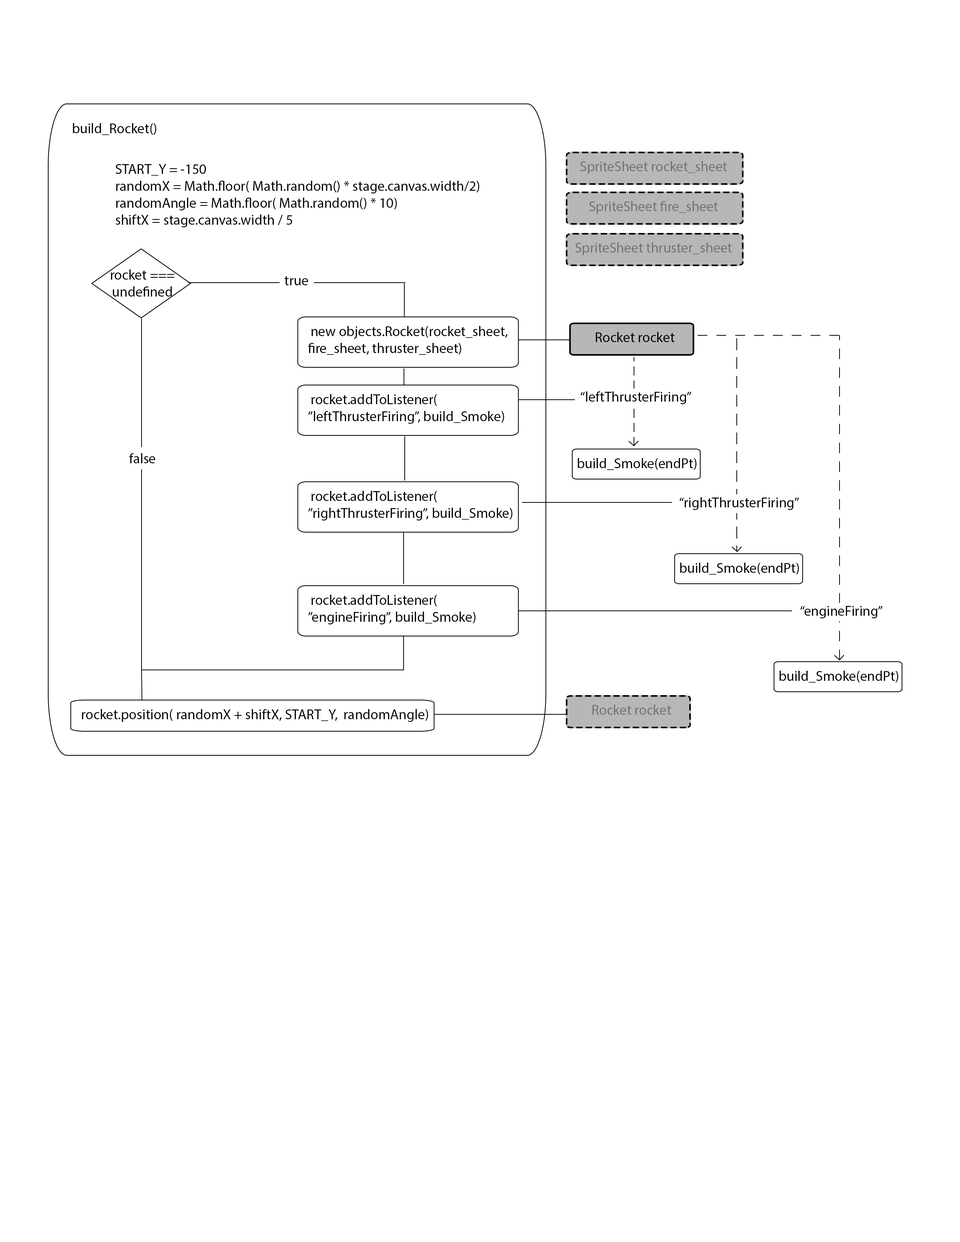
<style>
.page{position:relative;width:960px;height:1242px;background:#ffffff}
.page>*{position:absolute;margin:0}
.t1{font:14.1px "MyriadPro-Regular";color:#000000}
.t2{font:14.1px "MyriadPro-Regular";color:#737373}
</style>
<div class="page">
<p class="t1" style="left:73px;top:123px;width:83px;height:12px">build_Rocket()</p>
<p class="t2" style="left:580px;top:161px;width:147px;height:13px">SpriteSheet rocket_sheet</p>
<p class="t1" style="left:116px;top:164px;width:363px;height:63px">START_Y = -150<br>randomX = Math.floor( Math.random() * stage.canvas.width/2)<br>randomAngle = Math.floor( Math.random() * 10)<br>shiftX = stage.canvas.width / 5</p>
<p class="t2" style="left:589px;top:201px;width:129px;height:13px">SpriteSheet fire_sheet</p>
<p class="t2" style="left:575px;top:242px;width:157px;height:13px">SpriteSheet thruster_sheet</p>
<p class="t1" style="left:111px;top:270px;width:63px;height:27px;text-align:center">rocket ===<br>undefined</p>
<p class="t1" style="left:285px;top:276px;width:23px;height:9px">true</p>
<p class="t1" style="left:308px;top:326px;width:199px;height:29px">new objects.Rocket(rocket_sheet,<br>fire_sheet, thruster_sheet)</p>
<p class="t1" style="left:596px;top:332px;width:79px;height:10px">Rocket rocket</p>
<p class="t1" style="left:308px;top:394px;width:196px;height:30px">rocket.addToListener(<br>”leftThrusterFiring”, build_Smoke)</p>
<p class="t1" style="left:580px;top:391px;width:112px;height:13px">“leftThrusterFiring”</p>
<p class="t1" style="left:129px;top:453px;width:26px;height:10px">false</p>
<p class="t1" style="left:577px;top:458px;width:119px;height:12px">build_Smoke(endPt)</p>
<p class="t1" style="left:308px;top:491px;width:204px;height:30px">rocket.addToListener(<br>”rightThrusterFiring”, build_Smoke)</p>
<p class="t1" style="left:679px;top:497px;width:120px;height:13px">“rightThrusterFiring”</p>
<p class="t1" style="left:680px;top:563px;width:119px;height:12px">build_Smoke(endPt)</p>
<p class="t1" style="left:308px;top:595px;width:167px;height:30px">rocket.addToListener(<br>”engineFiring”, build_Smoke)</p>
<p class="t1" style="left:800px;top:606px;width:83px;height:12px">“engineFiring”</p>
<p class="t1" style="left:779px;top:671px;width:119px;height:12px">build_Smoke(endPt)</p>
<p class="t1" style="left:82px;top:709px;width:346px;height:13px">rocket.position( randomX + shiftX, START_Y,  randomAngle)</p>
<p class="t2" style="left:592px;top:705px;width:79px;height:10px">Rocket rocket</p>
</div>
